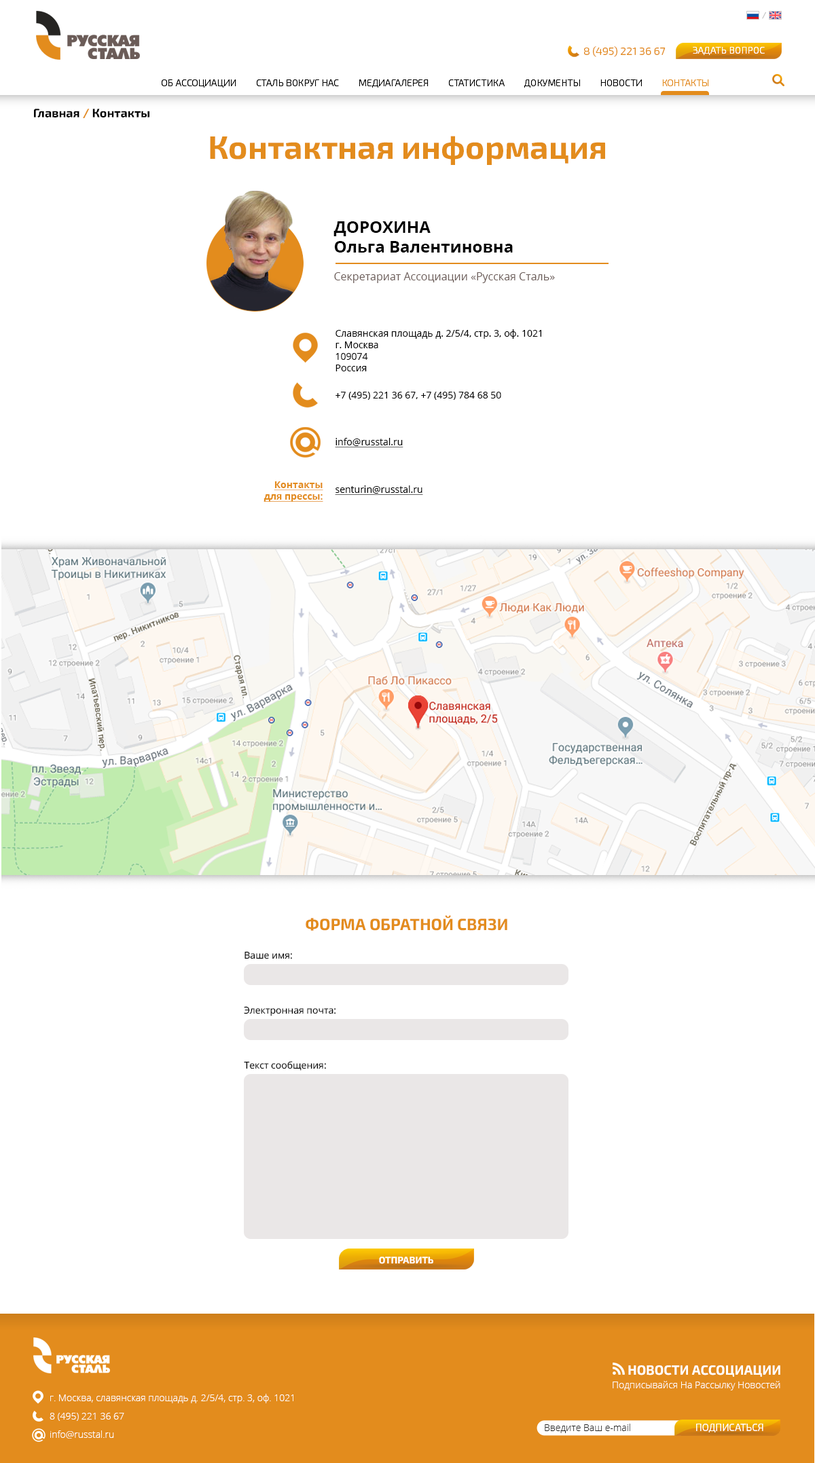
<style>
.page{position:relative;width:815px;height:1463px;background:#ffffff}
.page>*{position:absolute;margin:0}
.t1{font:8.1px "Exo2.0-Medium";color:#c3c3c3}
.t2{font:10.9px "Exo2.0-Light";color:#e38c1d}
.t3{font:9.6px "Exo2.0-Light";color:#ffffff}
.t4{font:9.5px "Exo2.0-Light";color:#000000}
.t5{font:9.5px "Exo2.0-Light";color:#e38c1d}
.t6{font:12.2px "Exo2.0-Bold";color:#000000}
.t7{font:12.2px "Exo2.0-Bold";color:#e38c1d}
.t8{font:32.6px "Exo2.0-Bold";color:#e38c1d}
.t9{font:16.3px "OpenSans-Bold";color:#000000}
.t10{font:16.3px "OpenSans-Bold";color:#000000;text-transform:uppercase}
.t11{font:10.9px "OpenSans";color:#6b5c58}
.t12{font:9.5px "OpenSans";color:#000000}
.t13{font:9.5px "OpenSans";color:#000000;text-decoration:underline}
.t14{font:9.5px "OpenSans-Bold";color:#e38c1d;text-decoration:underline}
.t15{font:16.3px "Exo2.0-Bold";color:#e38c1d;text-transform:uppercase}
.t16{font:9.5px "Exo2.0-Bold";color:#ffffff;text-transform:uppercase}
.t17{font:13.4px "Exo2.0-Bold";color:#ffffff}
.t18{font:9.5px "OpenSans-Light";color:#ffffff}
.t19{font:9.5px/18.3px "OpenSans-Light";color:#ffffff}
.t20{font:9.5px "OpenSans-Light";color:#252422}
.t21{font:10px "Exo2.0-Light";color:#ffffff}
</style>
<div class="page">
<p class="t1" style="left:762px;top:12px;width:4px;height:7px">/</p>
<p class="t2" style="left:584px;top:46px;width:81px;height:11px">8 (495) 221 36 67</p>
<p class="t3" style="left:693px;top:47px;width:72px;height:9px">ЗАДАТЬ ВОПРОС</p>
<p class="t4" style="left:161px;top:79px;width:548px;height:9px">ОБ АССОЦИАЦИИ         СТАЛЬ ВОКРУГ НАС         МЕДИАГАЛЕРЕЯ         СТАТИСТИКА         ДОКУМЕНТЫ         НОВОСТИ         <span class="t5">КОНТАКТЫ</span></p>
<p class="t6" style="left:34px;top:109px;width:115px;height:9px">Главная <span class="t7">/</span> Контакты</p>
<p class="t8" style="left:210px;top:136px;width:395px;height:29px">Контактная информация</p>
<p class="t9" style="left:333px;top:221px;width:180px;height:32px"><span class="t10">Дорохина<br></span>Ольга Валентиновна</p>
<p class="t11" style="left:334px;top:272px;width:221px;height:11px">Секретариат Ассоциации «Русская Сталь»</p>
<p class="t12" style="left:335px;top:329px;width:206px;height:42px">Славянская площадь д. 2/5/4, стр. 3, оф. 1021<br>г. Москва<br>109074<br>Россия</p>
<p class="t12" style="left:335px;top:392px;width:166px;height:8px">+7 (495) 221 36 67, +7 (495) 784 68 50</p>
<p class="t13" style="left:335px;top:438px;width:68px;height:9px">info@russtal.ru</p>
<p class="t14" style="left:263px;top:481px;width:60px;height:21px;text-align:right">Контакты<br>для прессы:</p>
<p class="t13" style="left:335px;top:486px;width:88px;height:9px">senturin@russtal.ru</p>
<p class="t15" style="left:306px;top:915px;width:201px;height:16px">Форма обратной связи</p>
<p class="t12" style="left:244px;top:951px;width:48px;height:8px">Ваше имя:</p>
<p class="t12" style="left:244px;top:1006px;width:92px;height:11px">Электронная почта:</p>
<p class="t12" style="left:244px;top:1061px;width:82px;height:10px">Текст сообщения:</p>
<p class="t16" style="left:379px;top:1257px;width:54px;height:7px">ОТПРАВИТЬ</p>
<p class="t17" style="left:628px;top:1366px;width:152px;height:11px">НОВОСТИ АССОЦИАЦИИ</p>
<p class="t18" style="left:613px;top:1381px;width:167px;height:10px">Подписывайся На Рассылку Новостей</p>
<p class="t19" style="left:50px;top:1394px;width:243px;height:45px">г. Москва, славянская площадь д. 2/5/4, стр. 3, оф. 1021<br>8 (495) 221 36 67<br>info@russtal.ru</p>
<p class="t20" style="left:545px;top:1424px;width:85px;height:9px">Введите Ваш e-mail</p>
<p class="t21" style="left:696px;top:1424px;width:67px;height:9px">ПОДПИСАТЬСЯ</p>
</div>
